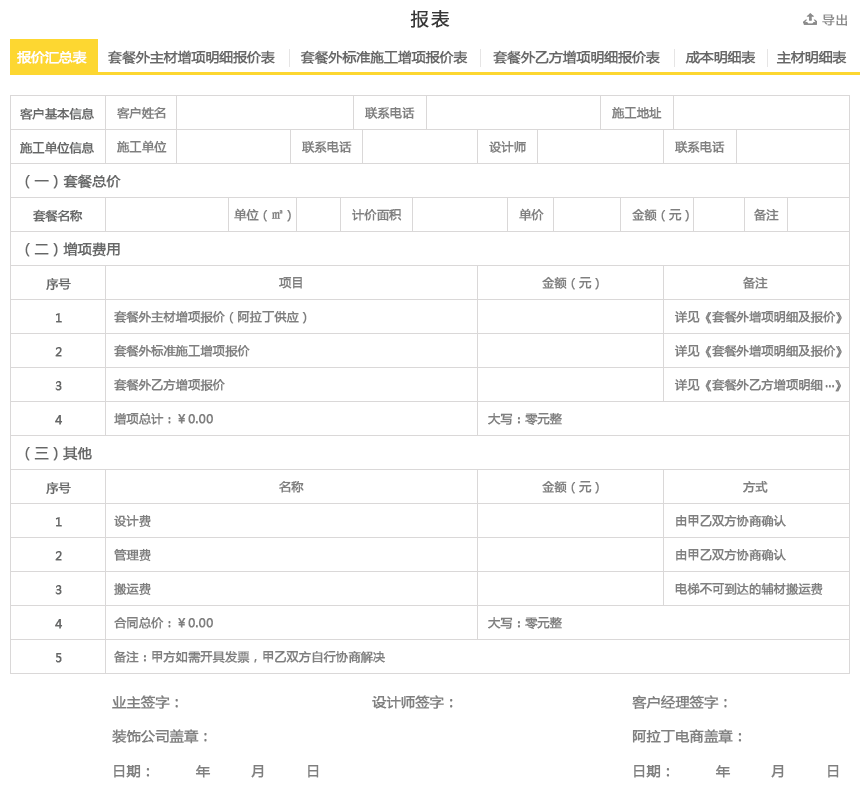
<style>
.page{position:relative;width:860px;height:800px;background:#ffffff}
.page>*{position:absolute;margin:0}
.t1{font:18px "MicrosoftYaHei";letter-spacing:0.1em;color:#373737;font-weight:bold}
.t2{font:12px "MicrosoftYaHei";letter-spacing:0.1em;color:#8b8b8b;font-weight:bold}
.t3{font:13.5px "MicrosoftYaHei";color:#676767;font-weight:bold}
.t4{font:13.5px "MicrosoftYaHei";color:#ffffff;font-weight:bold}
.t5{font:12px "MicrosoftYaHei";color:#666767;font-weight:bold}
.t6{font:12px "MicrosoftYaHei";color:#7f7f7f;font-weight:bold}
.t7{font:14px "MicrosoftYaHei";color:#666767;font-weight:bold}
.t8{font:12px "SimSun";color:#7f7f7f;font-weight:bold}
.t9{font:14px "MicrosoftYaHei";color:#7f7f7f;font-weight:bold}
</style>
<div class="page">
<p class="t1" style="left:410px;top:10px;width:40px;height:18px">报表</p>
<p class="t2" style="left:822px;top:14px;width:25px;height:12px">导出</p>
<p class="t3" style="left:17px;top:50px;width:830px;height:15px"><span class="t4">报价汇总表</span>     套餐外主材增项明细报价表      套餐外标准施工增项报价表      套餐外乙方增项明细报价表      成本明细表     主材明细表</p>
<p class="t5" style="left:20px;top:107px;width:74px;height:13px">客户基本信息</p>
<p class="t6" style="left:117px;top:107px;width:49px;height:12px">客户姓名</p>
<p class="t6" style="left:365px;top:107px;width:50px;height:12px">联系电话</p>
<p class="t6" style="left:612px;top:107px;width:50px;height:12px">施工地址</p>
<p class="t5" style="left:20px;top:141px;width:74px;height:13px">施工单位信息</p>
<p class="t6" style="left:117px;top:140px;width:50px;height:13px">施工单位</p>
<p class="t6" style="left:302px;top:141px;width:50px;height:12px">联系电话</p>
<p class="t6" style="left:489px;top:141px;width:37px;height:12px">设计师</p>
<p class="t6" style="left:675px;top:141px;width:50px;height:12px">联系电话</p>
<p class="t7" style="left:25px;top:174px;width:96px;height:15px">（一）套餐总价</p>
<p class="t5" style="left:33px;top:209px;width:50px;height:13px">套餐名称</p>
<p class="t6" style="left:234px;top:208px;width:57px;height:14px">单位（<span class="t8">㎡</span>）</p>
<p class="t6" style="left:352px;top:209px;width:50px;height:12px">计价面积</p>
<p class="t6" style="left:519px;top:208px;width:25px;height:13px">单价</p>
<p class="t6" style="left:632px;top:208px;width:57px;height:14px">金额（元）</p>
<p class="t6" style="left:754px;top:208px;width:25px;height:13px">备注</p>
<p class="t7" style="left:25px;top:242px;width:95px;height:15px">（二）增项费用</p>
<p class="t5" style="left:46px;top:278px;width:25px;height:13px">序号</p>
<p class="t6" style="left:279px;top:277px;width:23px;height:12px">项目</p>
<p class="t6" style="left:542px;top:276px;width:57px;height:14px">金额（元）</p>
<p class="t6" style="left:743px;top:276px;width:25px;height:13px">备注</p>
<p class="t5" style="left:55px;top:313px;width:7px;height:10px">1</p>
<p class="t6" style="left:114px;top:310px;width:193px;height:14px">套餐外主材增项报价（阿拉丁供应）</p>
<p class="t6" style="left:674px;top:310px;width:168px;height:14px">详见《套餐外增项明细及报价》</p>
<p class="t5" style="left:55px;top:347px;width:7px;height:10px">2</p>
<p class="t6" style="left:114px;top:344px;width:136px;height:14px">套餐外标准施工增项报价</p>
<p class="t6" style="left:674px;top:344px;width:168px;height:14px">详见《套餐外增项明细及报价》</p>
<p class="t5" style="left:55px;top:381px;width:7px;height:10px">3</p>
<p class="t6" style="left:114px;top:378px;width:111px;height:14px">套餐外乙方增项报价</p>
<p class="t6" style="left:674px;top:378px;width:167px;height:14px">详见《套餐外乙方增项明细   》</p>
<p class="t6" style="left:825px;top:385px;width:10px;height:3px">...</p>
<p class="t6" style="left:114px;top:413px;width:99px;height:12px">增项总计：￥0.00</p>
<p class="t6" style="left:488px;top:412px;width:74px;height:13px">大写：零元整</p>
<p class="t5" style="left:55px;top:415px;width:8px;height:10px">4</p>
<p class="t7" style="left:25px;top:446px;width:67px;height:15px">（三）其他</p>
<p class="t5" style="left:46px;top:482px;width:25px;height:13px">序号</p>
<p class="t6" style="left:279px;top:481px;width:25px;height:12px">名称</p>
<p class="t6" style="left:542px;top:480px;width:57px;height:14px">金额（元）</p>
<p class="t6" style="left:743px;top:480px;width:25px;height:13px">方式</p>
<p class="t5" style="left:55px;top:517px;width:7px;height:10px">1</p>
<p class="t6" style="left:114px;top:514px;width:37px;height:14px">设计费</p>
<p class="t6" style="left:676px;top:515px;width:110px;height:12px">由甲乙双方协商确认</p>
<p class="t5" style="left:55px;top:551px;width:7px;height:10px">2</p>
<p class="t6" style="left:114px;top:548px;width:37px;height:14px">管理费</p>
<p class="t6" style="left:676px;top:549px;width:110px;height:12px">由甲乙双方协商确认</p>
<p class="t6" style="left:114px;top:582px;width:37px;height:14px">搬运费</p>
<p class="t6" style="left:675px;top:582px;width:148px;height:14px">电梯不可到达的辅材搬运费</p>
<p class="t5" style="left:55px;top:585px;width:7px;height:10px">3</p>
<p class="t6" style="left:114px;top:617px;width:99px;height:12px">合同总价：￥0.00</p>
<p class="t6" style="left:488px;top:616px;width:74px;height:13px">大写：零元整</p>
<p class="t5" style="left:55px;top:619px;width:8px;height:10px">4</p>
<p class="t5" style="left:55px;top:653px;width:7px;height:10px">5</p>
<p class="t6" style="left:114px;top:650px;width:271px;height:14px">备注：甲方如需开具发票，甲乙双方自行协商解决</p>
<p class="t9" style="left:112px;top:695px;width:66px;height:14px">业主签字：</p>
<p class="t9" style="left:372px;top:695px;width:81px;height:14px">设计师签字：</p>
<p class="t9" style="left:632px;top:695px;width:95px;height:15px">客户经理签字：</p>
<p class="t9" style="left:112px;top:729px;width:95px;height:15px">装饰公司盖章：</p>
<p class="t9" style="left:632px;top:729px;width:110px;height:15px">阿拉丁电商盖章：</p>
<p class="t9" style="left:114px;top:765px;width:205px;height:13px">日期：         年         月         日</p>
<p class="t9" style="left:634px;top:765px;width:205px;height:13px">日期：         年         月         日</p>
</div>
